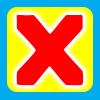
<style>
.page{position:relative;width:100px;height:100px;background:#ff0000}
.page>*{position:absolute;margin:0}
.t1{font:24.5px "BerlinSansFBDemi-Bold";color:#ff0000;scale:1.17 1}
</style>
<div class="page">
<p class="t1" style="left:16px;top:14px;width:68px;height:72px">X</p>
</div>
